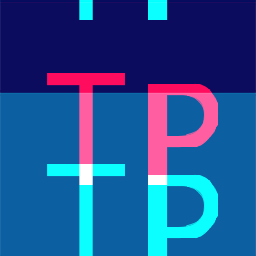
<style>
.page{position:relative;width:256px;height:256px;background:#0c5fa1}
.page>*{position:absolute;margin:0}
.t1{font:160px "NirmalaUI"}
.t2{font:144px "NirmalaUI";color:#ff5fa1}
</style>
<div class="page">
<p class="t1" style="left:47px;top:71px;width:78px;height:112px">T</p>
<p class="t2" style="left:155px;top:82px;width:62px;height:101px">P</p>
</div>
